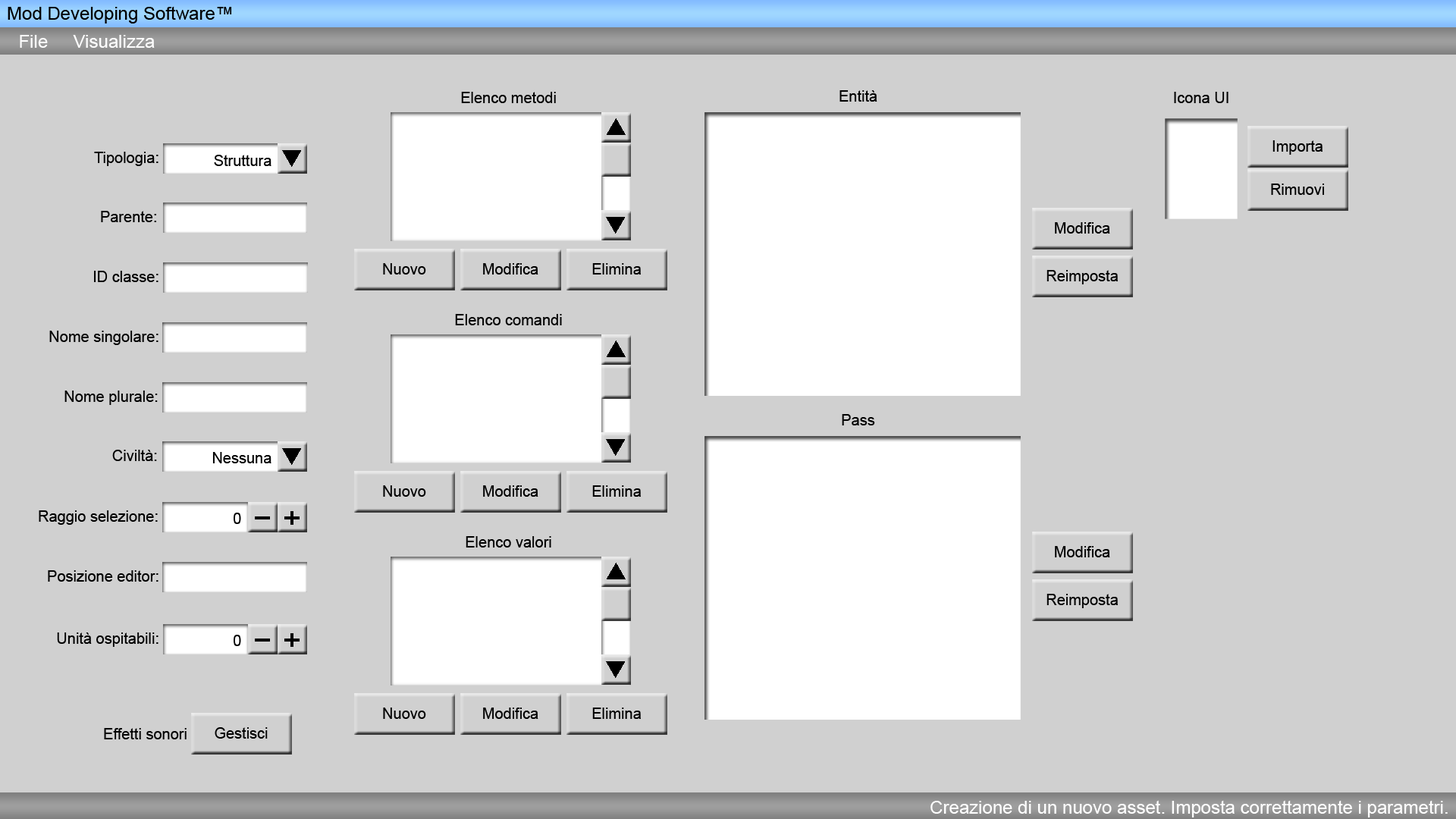
<style>
.page{position:relative;width:1456px;height:819px;background:#d0d0d0}
.page>*{position:absolute;margin:0}
.t1{font:18.2px "ArialMT";color:#000000}
.t2{font:18.2px "ArialMT";color:#ffffff}
.t3{font:15.2px "ArialMT";color:#000000}
</style>
<div class="page">
<p class="t1" style="left:8px;top:6px;width:224px;height:18px">Mod Developing Software™</p>
<p class="t2" style="left:20px;top:35px;width:135px;height:13px">File Visualizza</p>
<p class="t3" style="left:461px;top:92px;width:95px;height:11px">Elenco metodi</p>
<p class="t3" style="left:839px;top:90px;width:38px;height:12px">Entità</p>
<p class="t3" style="left:1174px;top:92px;width:54px;height:11px">Icona UI</p>
<p class="t3" style="left:1272px;top:140px;width:51px;height:15px">Importa</p>
<p class="t3" style="left:94px;top:152px;width:64px;height:14px">Tipologia:</p>
<p class="t3" style="left:214px;top:155px;width:57px;height:11px">Struttura</p>
<p class="t3" style="left:1271px;top:184px;width:53px;height:11px">Rimuovi</p>
<p class="t3" style="left:101px;top:211px;width:55px;height:11px">Parente:</p>
<p class="t3" style="left:1055px;top:222px;width:55px;height:12px">Modifica</p>
<p class="t3" style="left:383px;top:263px;width:43px;height:12px">Nuovo</p>
<p class="t3" style="left:483px;top:263px;width:55px;height:12px">Modifica</p>
<p class="t3" style="left:592px;top:263px;width:49px;height:12px">Elimina</p>
<p class="t3" style="left:1046px;top:270px;width:72px;height:14px">Reimposta</p>
<p class="t3" style="left:94px;top:271px;width:64px;height:11px">ID classe:</p>
<p class="t3" style="left:455px;top:314px;width:107px;height:11px">Elenco comandi</p>
<p class="t3" style="left:49px;top:331px;width:109px;height:14px">Nome singolare:</p>
<p class="t3" style="left:64px;top:391px;width:94px;height:14px">Nome plurale:</p>
<p class="t3" style="left:842px;top:414px;width:33px;height:11px">Pass</p>
<p class="t3" style="left:112px;top:450px;width:45px;height:11px">Civiltà:</p>
<p class="t3" style="left:212px;top:452px;width:59px;height:11px">Nessuna</p>
<p class="t3" style="left:383px;top:485px;width:43px;height:12px">Nuovo</p>
<p class="t3" style="left:483px;top:485px;width:55px;height:12px">Modifica</p>
<p class="t3" style="left:592px;top:485px;width:49px;height:12px">Elimina</p>
<p class="t3" style="left:39px;top:510px;width:119px;height:15px">Raggio selezione:</p>
<p class="t3" style="left:234px;top:513px;width:7px;height:11px">0</p>
<p class="t3" style="left:466px;top:536px;width:85px;height:12px">Elenco valori</p>
<p class="t3" style="left:1055px;top:546px;width:55px;height:11px">Modifica</p>
<p class="t3" style="left:48px;top:570px;width:110px;height:12px">Posizione editor:</p>
<p class="t3" style="left:1046px;top:594px;width:72px;height:14px">Reimposta</p>
<p class="t3" style="left:57px;top:632px;width:101px;height:15px">Unità ospitabili:</p>
<p class="t3" style="left:234px;top:635px;width:7px;height:11px">0</p>
<p class="t3" style="left:383px;top:708px;width:43px;height:11px">Nuovo</p>
<p class="t3" style="left:483px;top:708px;width:55px;height:11px">Modifica</p>
<p class="t3" style="left:592px;top:708px;width:49px;height:11px">Elimina</p>
<p class="t3" style="left:104px;top:728px;width:83px;height:11px">Effetti sonori</p>
<p class="t3" style="left:215px;top:727px;width:53px;height:12px">Gestisci</p>
<p class="t2" style="left:930px;top:800px;width:518px;height:17px">Creazione di un nuovo asset. Imposta correttamente i parametri.</p>
</div>
